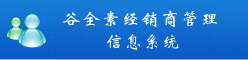
<style>
.page{position:relative;width:248px;height:60px}
.page>*{position:absolute;margin:0}
.t1{font:18px "STXinwei";letter-spacing:0.1em;color:#ffffff}
.t2{font:18px "STXinwei";letter-spacing:0.05em;color:#f4f7f9}
</style>
<div class="page">
<p class="t1" style="left:62px;top:10px;width:155px;height:17px">谷全素经销商管理</p>
<p class="t2" style="left:106px;top:34px;width:73px;height:16px">信息系统</p>
</div>
